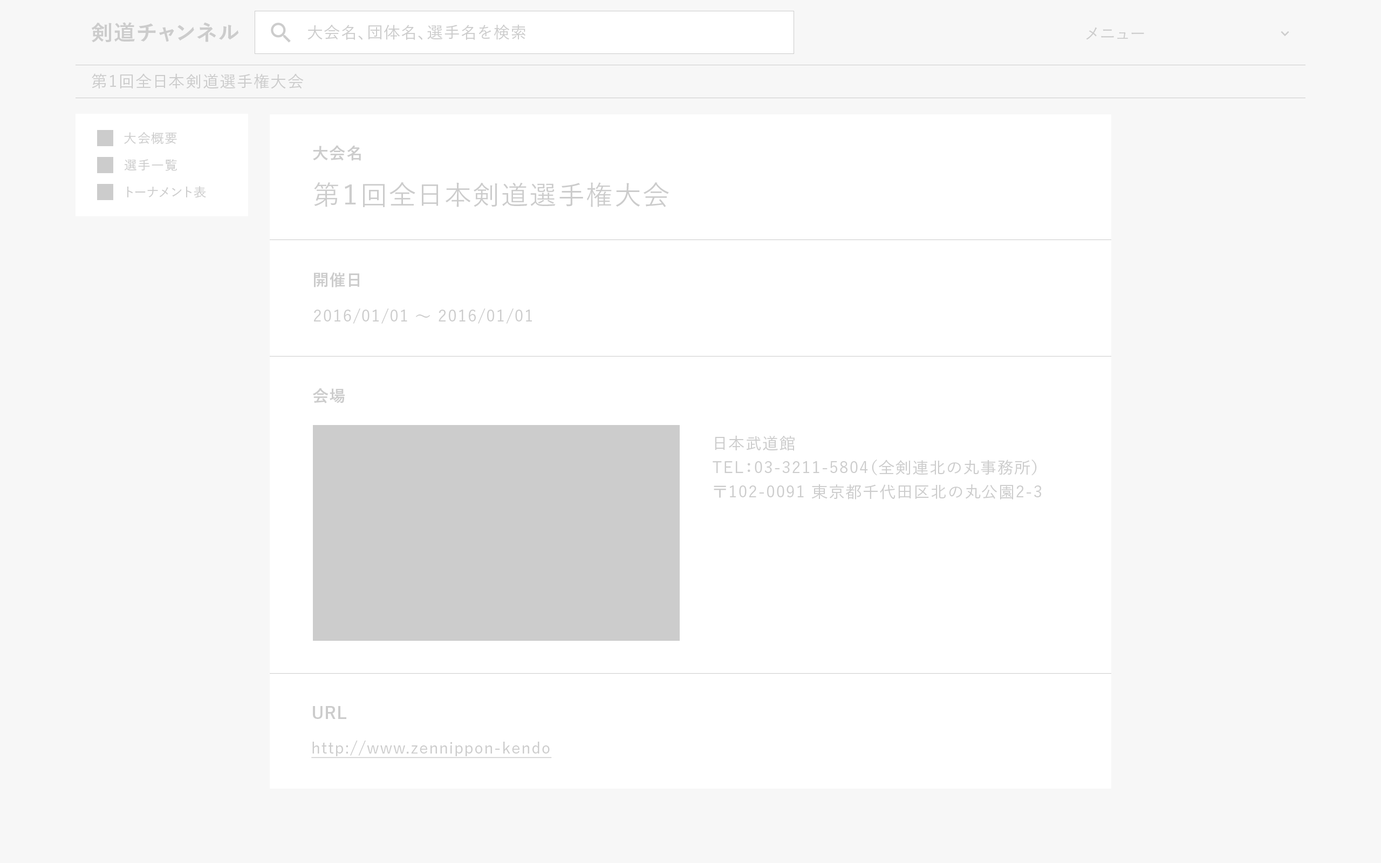
<style>
.page{position:relative;width:1381px;height:863px;background:#f7f7f7}
.page>*{position:absolute;margin:0}
.t1{font:21.6px "YuGo-Bold";letter-spacing:0.05em;color:#cccccc}
.t2{font:16.2px "YuGo-Medium";letter-spacing:0.05em;color:#cccccc}
.t3{font:12.9px/27px "YuGo-Medium";letter-spacing:0.05em;color:#cccccc}
.t4{font:16.2px "YuGo-Bold";letter-spacing:0.05em;color:#cccccc}
.t5{font:27px "YuGo-Medium";letter-spacing:0.05em;color:#cccccc}
.t6{font:16.2px/24.3px "YuGo-Medium";letter-spacing:0.05em;color:#cccccc}
.t7{font:16.2px "YuGo-Medium";letter-spacing:0.05em;color:#cccccc;text-decoration:underline}
</style>
<div class="page">
<p class="t1" style="left:91px;top:22px;width:148px;height:21px">剣道チャンネル</p>
<p class="t2" style="left:308px;top:24px;width:218px;height:16px">大会名、団体名、選手名を検索</p>
<p class="t2" style="left:1086px;top:27px;width:58px;height:13px">メニュー</p>
<p class="t2" style="left:92px;top:73px;width:212px;height:16px">第1回全日本剣道選手権大会</p>
<p class="t3" style="left:124px;top:132px;width:82px;height:66px">大会概要<br>選手一覧<br>トーナメント表</p>
<p class="t4" style="left:313px;top:145px;width:48px;height:16px">大会名</p>
<p class="t5" style="left:314px;top:182px;width:355px;height:25px">第１回全日本剣道選手権大会</p>
<p class="t4" style="left:314px;top:272px;width:45px;height:16px">開催日</p>
<p class="t2" style="left:314px;top:309px;width:218px;height:15px">2016/01/01 〜 2016/01/01</p>
<p class="t4" style="left:313px;top:388px;width:32px;height:16px">会場</p>
<p class="t6" style="left:713px;top:435px;width:328px;height:65px">日本武道館<br>TEL：03-3211-5804（全剣連北の丸事務所）<br>〒102-0091 東京都千代田区北の丸公園2-3</p>
<p class="t4" style="left:313px;top:706px;width:33px;height:13px">URL</p>
<p class="t7" style="left:311px;top:741px;width:241px;height:18px">http://www.zennippon-kendo</p>
</div>
